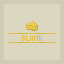
<style>
.page{position:relative;width:64px;height:64px;background:#dcd7c0}
.page>*{position:absolute;margin:0}
.t1{font:8px "ChevyRay---Babyblocks";color:#dfc150}
</style>
<div class="page">
<p class="t1" style="left:22px;top:35px;width:20px;height:6px">BLAND</p>
</div>
